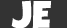
<style>
.page{position:relative;width:67px;height:28px;background:#333333}
.page>*{position:absolute;margin:0}
.t1{font:38.4px "LuckiestGuy-Regular";color:#ffffff}
</style>
<div class="page">
<p class="t1" style="left:11px;top:0px;width:41px;height:29px">JE</p>
</div>
